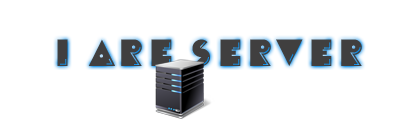
<style>
.page{position:relative;width:400px;height:120px;background:#ffffff}
.page>*{position:absolute;margin:0}
.t1{font:48px "CrackManFront-Regular";color:#403f3f}
</style>
<div class="page">
<p class="t1" style="left:57px;top:39px;width:305px;height:27px">I are server</p>
</div>
